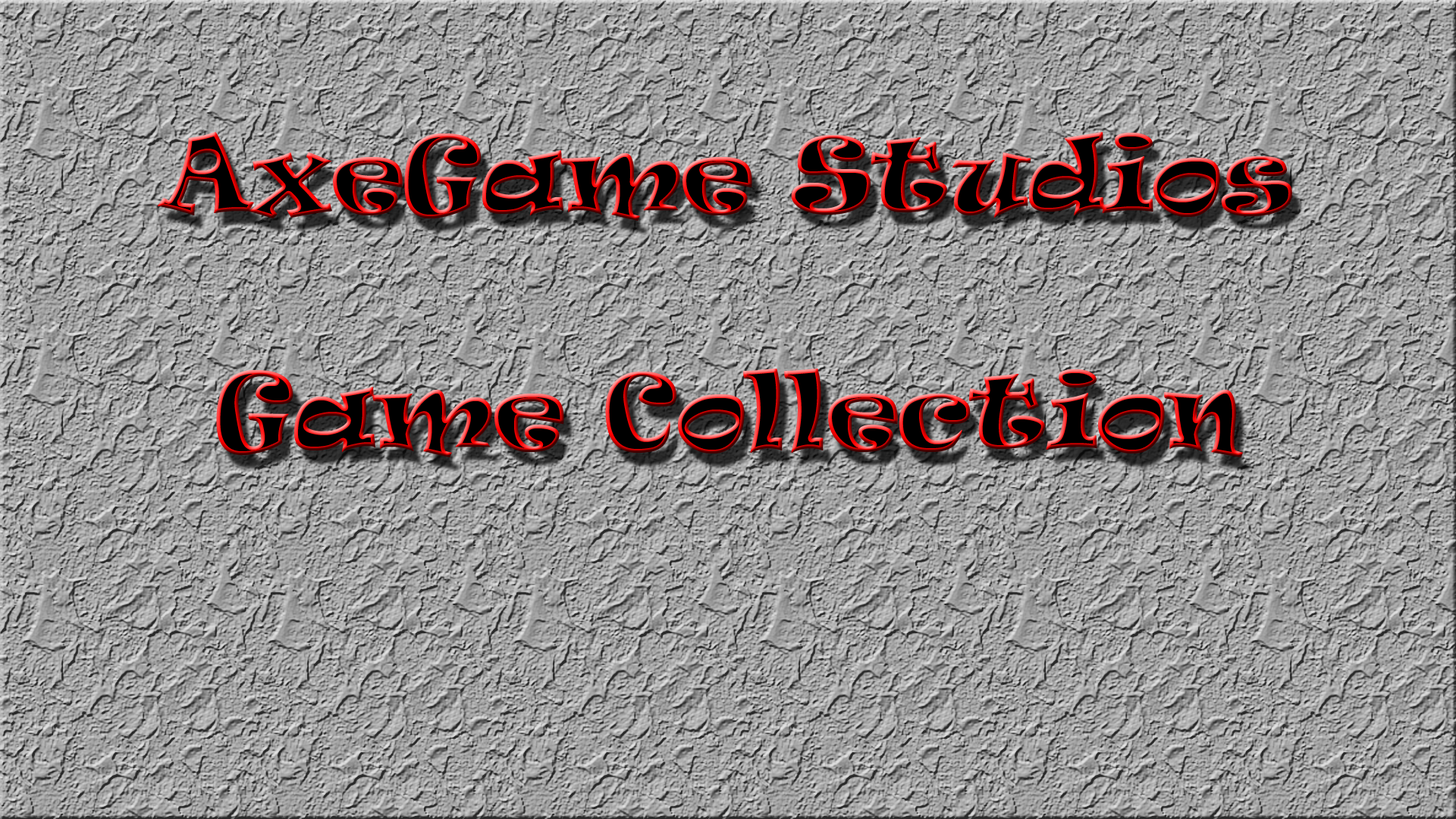
<style>
.page{position:relative;width:1456px;height:819px}
.page>*{position:absolute;margin:0}
.t1{font:98.6px "Ravie"}
</style>
<div class="page">
<p class="t1" style="left:157px;top:132px;width:1135px;height:325px;text-align:center">AxeGame Studios<br><br>Game Collection</p>
</div>
